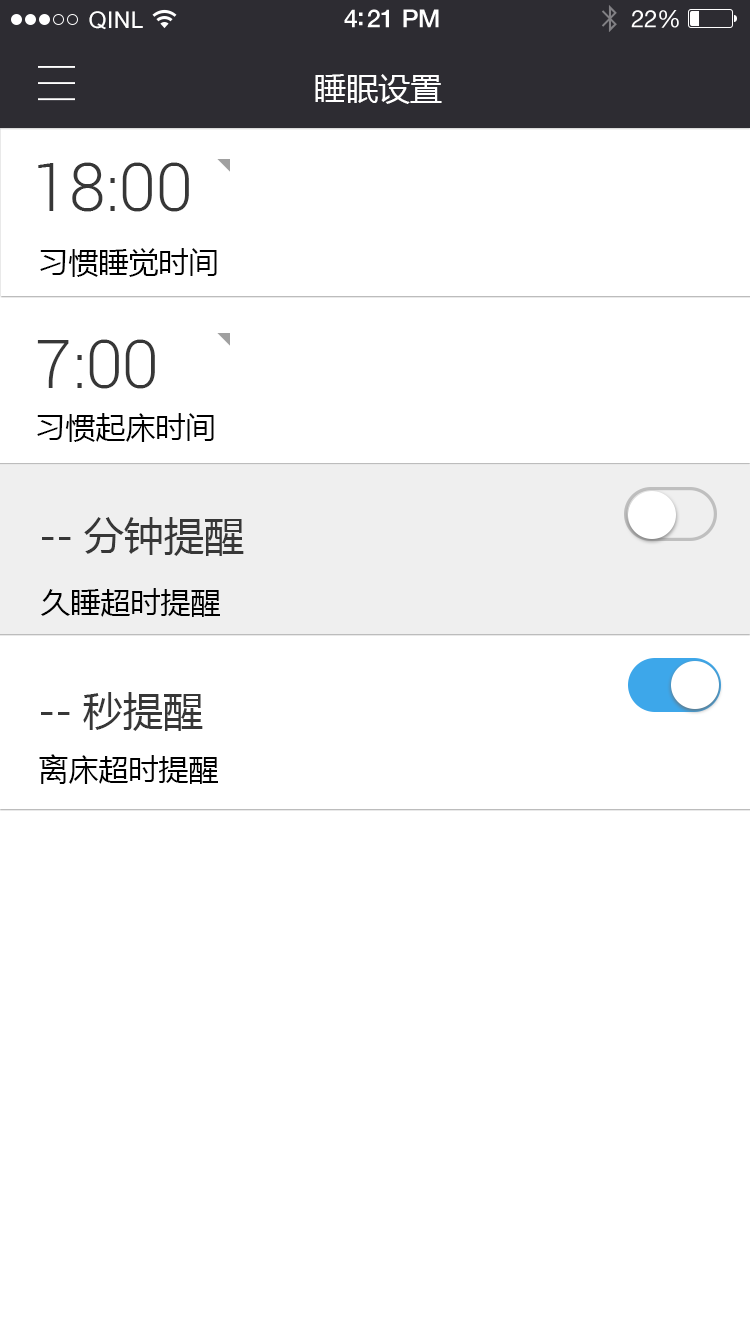
<style>
.page{position:relative;width:750px;height:1334px;background:#ffffff}
.page>*{position:absolute;margin:0}
.t1{font:23px "ArialUnicodeMS";letter-spacing:0.02em;color:#ffffff}
.t2{font:25px "HelveticaNeue-Medium";letter-spacing:-0.02em;color:#ffffff}
.t3{font:24px "HelveticaNeue";letter-spacing:-0.02em;color:#ffffff}
.t4{font:32px "MicrosoftYaHei";color:#ffffff}
.t5{font:66px "Roboto-Light";color:#373737}
.t6{font:30px "MicrosoftYaHei";color:#000000}
.t7{font:40px "MicrosoftYaHei";color:#373737}
</style>
<div class="page">
<p class="t1" style="left:89px;top:11px;width:54px;height:19px">QINL</p>
<p class="t2" style="left:344px;top:9px;width:95px;height:19px">4:21 PM</p>
<p class="t3" style="left:631px;top:10px;width:48px;height:18px">22%</p>
<p class="t4" style="left:315px;top:74px;width:127px;height:30px">睡眠设置</p>
<p class="t5" style="left:38px;top:162px;width:151px;height:50px">18:00</p>
<p class="t6" style="left:40px;top:248px;width:177px;height:29px">习惯睡觉时间</p>
<p class="t5" style="left:37px;top:339px;width:118px;height:50px">7:00</p>
<p class="t6" style="left:37px;top:413px;width:177px;height:29px">习惯起床时间</p>
<p class="t7" style="left:42px;top:517px;width:202px;height:39px">--分钟提醒</p>
<p class="t6" style="left:41px;top:588px;width:179px;height:29px">久睡超时提醒</p>
<p class="t7" style="left:41px;top:692px;width:162px;height:39px">--秒提醒</p>
<p class="t6" style="left:39px;top:754px;width:179px;height:30px">离床超时提醒</p>
</div>
